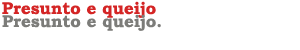
<style>
.page{position:relative;width:300px;height:50px;background:#ffffff}
.page>*{position:absolute;margin:0}
.t1{font:17px "BookmanOldStyle-Bold";color:#d42525}
.t2{font:17px "BookmanOldStyle-Bold";color:#7c7c79}
</style>
<div class="page">
<p class="t1" style="left:2px;top:1px;width:154px;height:17px">Presunto e queijo</p>
<p class="t2" style="left:2px;top:14px;width:159px;height:17px">Presunto e queijo.</p>
</div>
